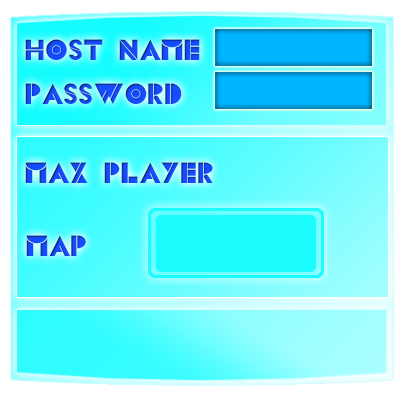
<style>
.page{position:relative;width:404px;height:399px}
.page>*{position:absolute;margin:0}
.t1{font:30px "CSBlocks";color:#154cff}
</style>
<div class="page">
<p class="t1" style="left:25px;top:39px;width:175px;height:21px">host Name</p>
<p class="t1" style="left:25px;top:83px;width:157px;height:21px">password</p>
<p class="t1" style="left:25px;top:162px;width:188px;height:21px">max player</p>
<p class="t1" style="left:26px;top:235px;width:60px;height:21px">map</p>
</div>
